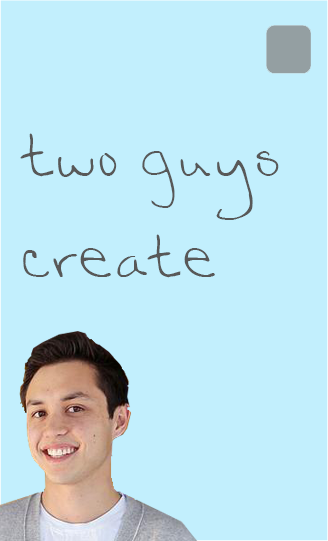
<style>
.page{position:relative;width:328px;height:541px;background:#c2effd}
.page>*{position:absolute;margin:0}
.t1{font:58px/101px "Katyhandwriting1-Medium";color:#585858}
</style>
<div class="page">
<p class="t1" style="left:20px;top:133px;width:259px;height:145px">two guys<br>create</p>
</div>
